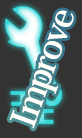
<style>
.page{position:relative;width:82px;height:138px;background:#333333}
.page>*{position:absolute;margin:0}
.t1{font:36px "HeiseiMinStd-W7";letter-spacing:-0.04em;color:#fffef9}
</style>
<div class="page">
<p class="t1" style="left:9px;top:10px;width:65px;height:119px;rotate:-70deg">Improve</p>
</div>
